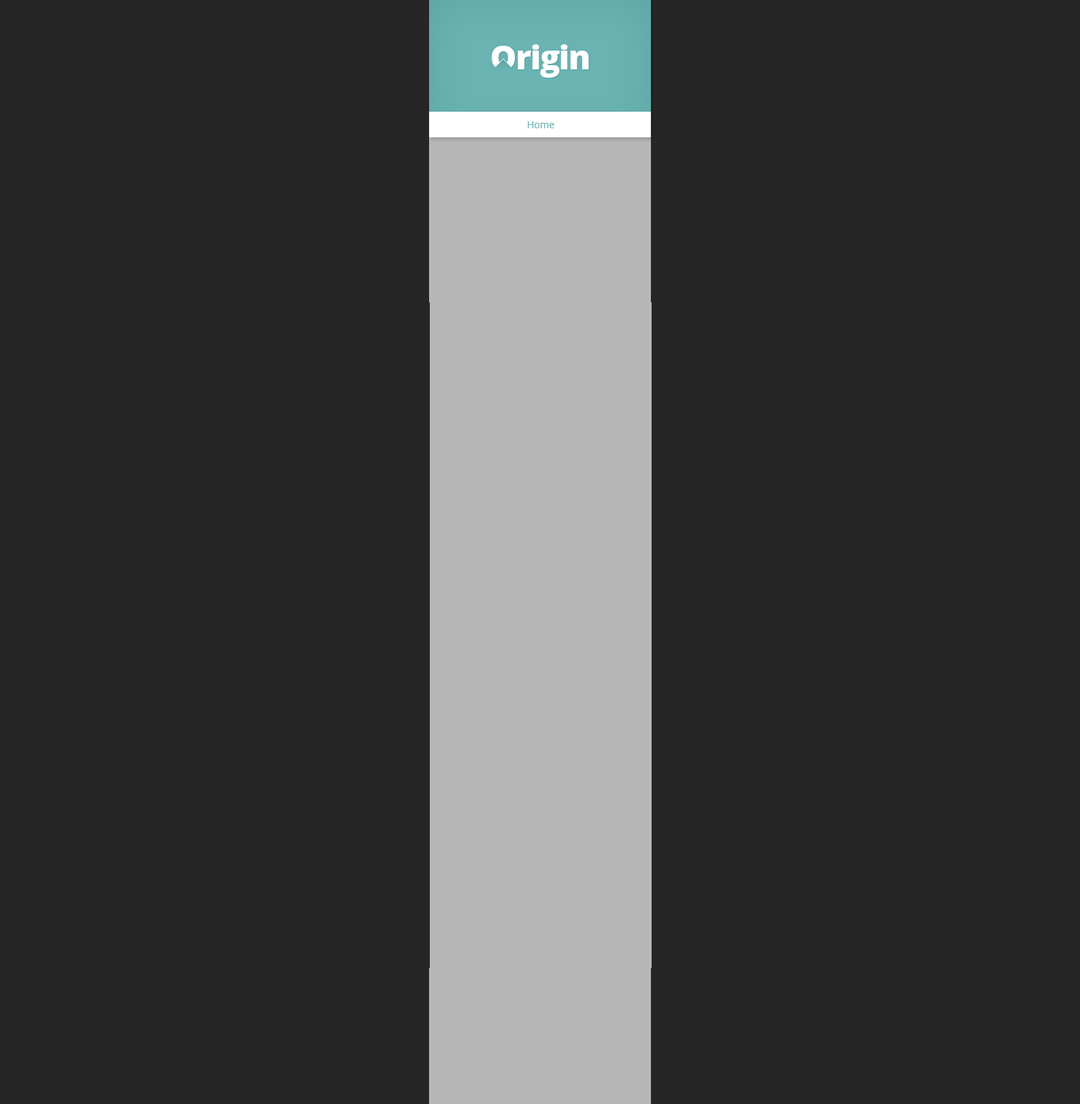
<style>
.page{position:relative;width:1080px;height:1104px;background:#262626}
.page>*{position:absolute;margin:0}
.t1{font:33.3px "OpenSans-Extrabold";letter-spacing:-0.025em;color:#ffffff}
.t2{font:9.7px "OpenSans";color:#6ab3b2}
</style>
<div class="page">
<p class="t1" style="left:492px;top:44px;width:97px;height:34px">Origin</p>
<p class="t1" style="left:492px;top:44px;width:97px;height:34px">Origin</p>
<p class="t1" style="left:492px;top:44px;width:97px;height:34px">Origin</p>
<p class="t2" style="left:528px;top:121px;width:27px;height:7px">Home</p>
<p class="t2" style="left:528px;top:121px;width:27px;height:7px">Home</p>
<p class="t2" style="left:528px;top:121px;width:27px;height:7px">Home</p>
</div>
